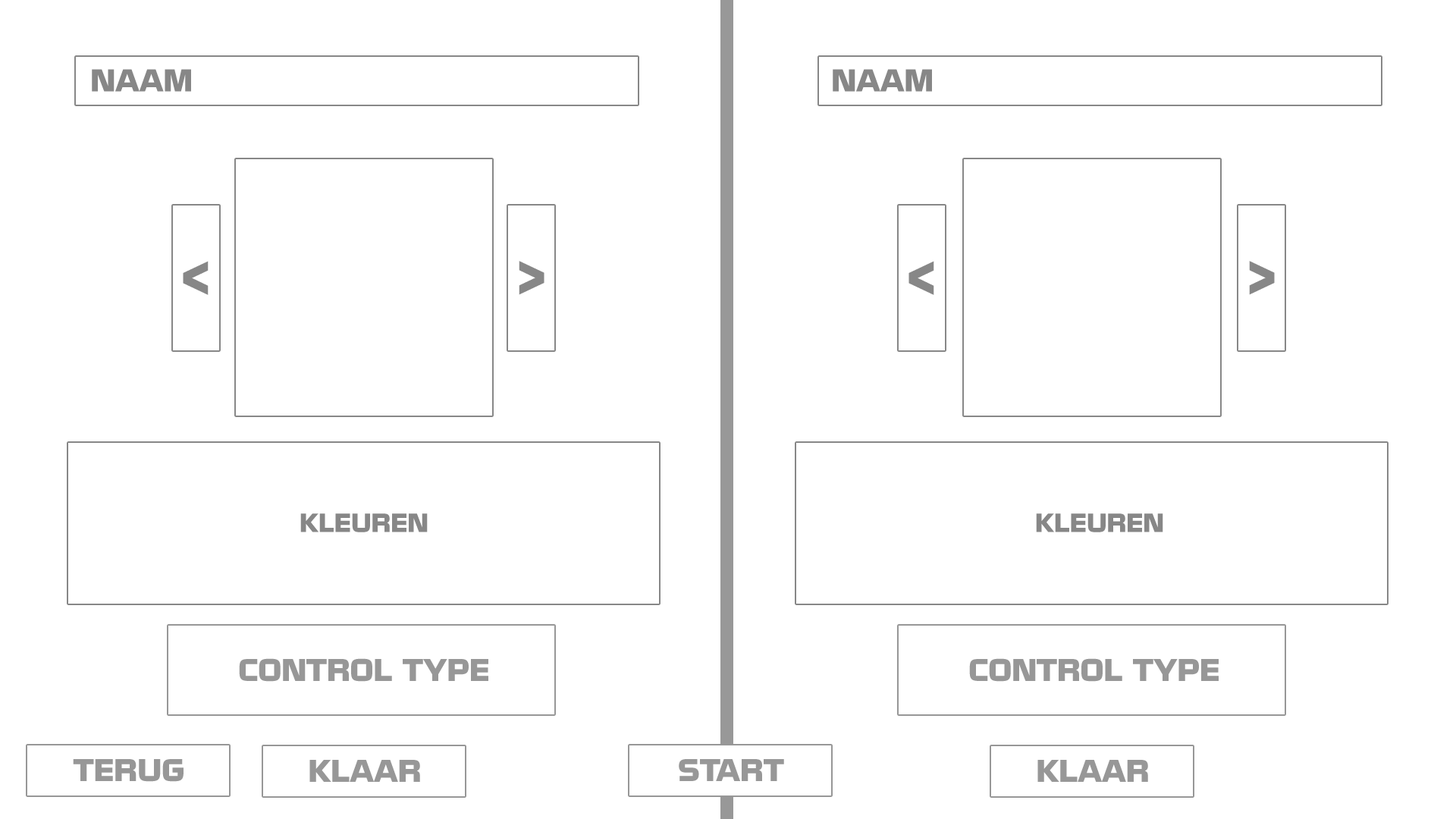
<style>
.page{position:relative;width:1456px;height:819px;background:#ffffff}
.page>*{position:absolute;margin:0}
.t1{font:27.3px "NissanOpti";color:#878787}
.t2{font:45.5px "NissanOpti";color:#878787}
.t3{font:22.7px "NissanOpti";color:#878787}
.t4{font:27.3px "NissanOpti";color:#979797}
</style>
<div class="page">
<p class="t1" style="left:92px;top:69px;width:99px;height:23px">NAAM</p>
<p class="t1" style="left:833px;top:69px;width:99px;height:23px">NAAM</p>
<p class="t2" style="left:183px;top:261px;width:26px;height:34px;rotate:180deg">&gt;</p>
<p class="t2" style="left:519px;top:261px;width:25px;height:34px">&gt;</p>
<p class="t2" style="left:908px;top:261px;width:26px;height:34px;rotate:180deg">&gt;</p>
<p class="t2" style="left:1249px;top:261px;width:26px;height:34px">&gt;</p>
<p class="t3" style="left:300px;top:513px;width:128px;height:19px">KLEUREN</p>
<p class="t3" style="left:1036px;top:513px;width:127px;height:19px">KLEUREN</p>
<p class="t4" style="left:239px;top:658px;width:249px;height:24px">CONTROL TYPE</p>
<p class="t4" style="left:969px;top:658px;width:250px;height:24px">CONTROL TYPE</p>
<p class="t4" style="left:73px;top:759px;width:111px;height:23px">TERUG</p>
<p class="t4" style="left:309px;top:760px;width:111px;height:22px">KLAAR</p>
<p class="t4" style="left:679px;top:759px;width:105px;height:22px">START</p>
<p class="t4" style="left:1037px;top:760px;width:111px;height:22px">KLAAR</p>
</div>
